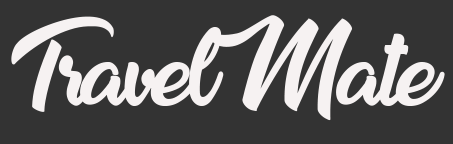
<style>
.page{position:relative;width:453px;height:144px;background:#333333}
.page>*{position:absolute;margin:0}
.t1{font:120px "SweetSensationsPersonalUse";letter-spacing:-0.025em;color:#f6f2f2}
</style>
<div class="page">
<p class="t1" style="left:11px;top:15px;width:434px;height:106px">TravelMate</p>
</div>
